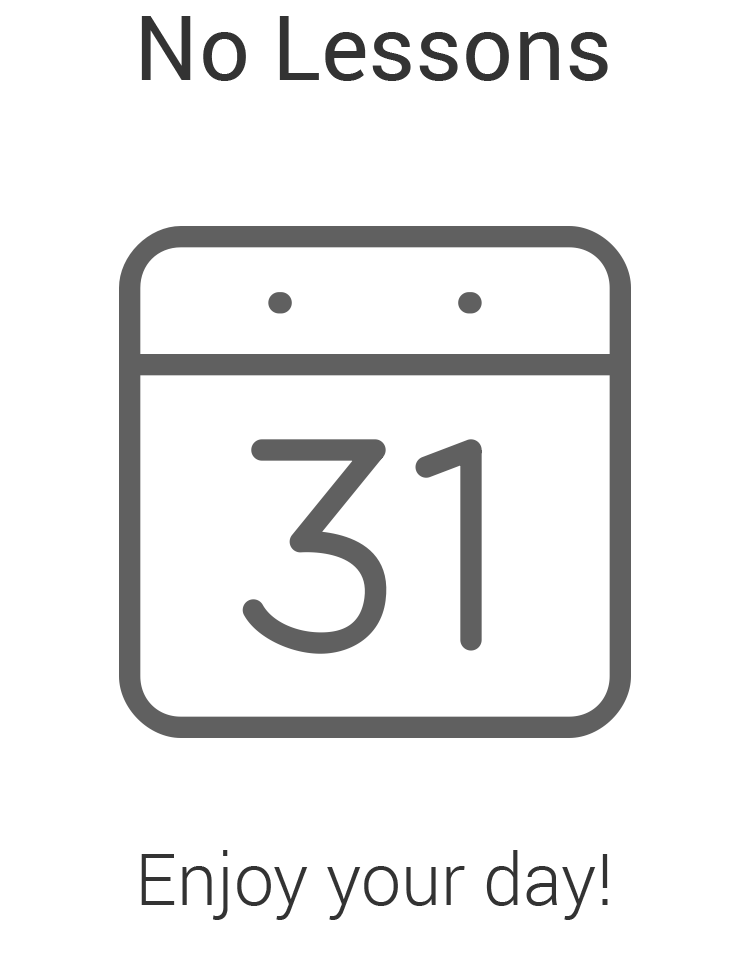
<style>
.page{position:relative;width:750px;height:963px;background:#ffffff}
.page>*{position:absolute;margin:0}
.t1{font:90px "Roboto-Regular";color:#333333}
.t2{font:72px "Roboto-Light";color:#333333}
</style>
<div class="page">
<p class="t1" style="left:141px;top:16px;width:467px;height:65px">No Lessons</p>
<p class="t2" style="left:141px;top:850px;width:467px;height:70px">Enjoy your day!</p>
</div>
